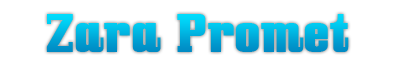
<style>
.page{position:relative;width:400px;height:71px;background:#ffffff}
.page>*{position:absolute;margin:0}
.t1{font:48px "Bullpen"}
</style>
<div class="page">
<p class="t1" style="left:46px;top:14px;width:303px;height:38px">Zara Promet</p>
</div>
